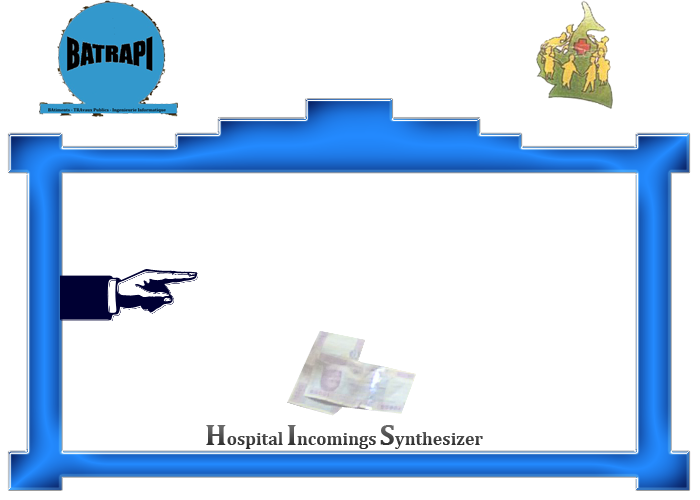
<style>
.page{position:relative;width:700px;height:500px;background:#ffffff}
.page>*{position:absolute;margin:0}
.t1{font:18px "Cambria-Bold";color:#414141}
.t2{font:30px "Cambria-Bold";color:#414141}
</style>
<div class="page">
<p class="t1" style="left:206px;top:425px;width:277px;height:24px"><span class="t2">H</span>ospital <span class="t2">I</span>ncomings <span class="t2">S</span>ynthesizer</p>
</div>
